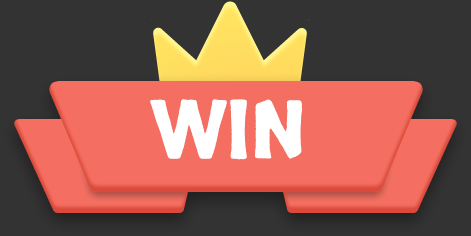
<style>
.page{position:relative;width:471px;height:236px;background:#333333}
.page>*{position:absolute;margin:0}
.t1{font:80px "Skranji";color:#ffffff}
</style>
<div class="page">
<p class="t1" style="left:150px;top:99px;width:152px;height:61px">WIN</p>
</div>
